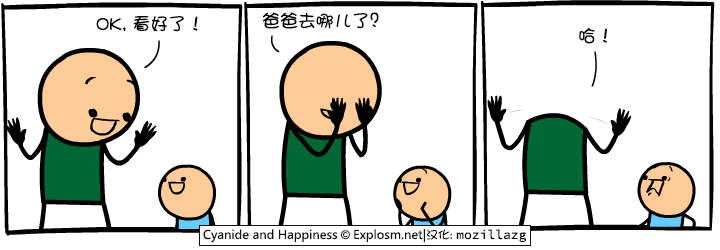
<style>
.page{position:relative;width:720px;height:250px;background:#ffffff}
.page>*{position:absolute;margin:0}
.t1{font:18px "DFPShaoNvW5";color:#000000}
</style>
<div class="page">
<p class="t1" style="left:96px;top:16px;width:102px;height:16px">OK, 看好了！</p>
<p class="t1" style="left:262px;top:12px;width:117px;height:17px">爸爸去哪儿了？</p>
<p class="t1" style="left:579px;top:27px;width:29px;height:17px">哈！</p>
</div>
